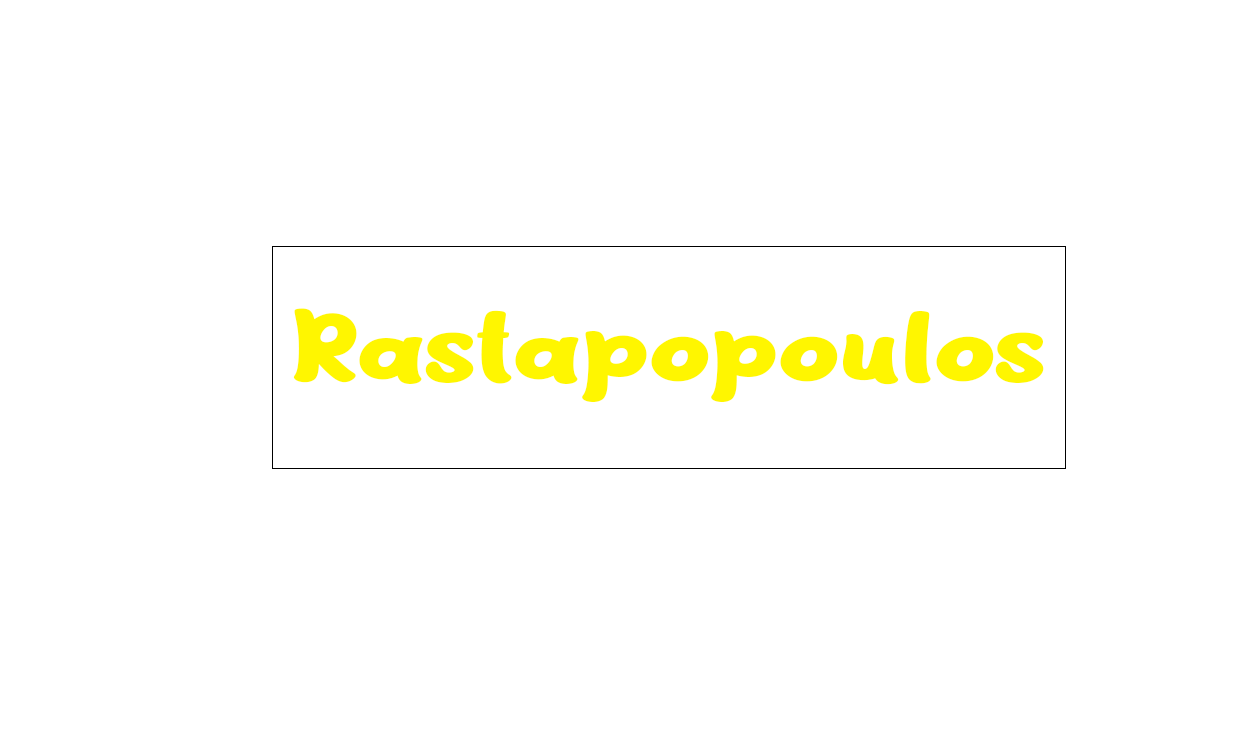
<style>
.page{position:relative;width:1250px;height:750px;background:#ffffff}
.page>*{position:absolute;margin:0}
.t1{font:93.1px "ChocolateCookies";color:#fff600;scale:1.2 1}
</style>
<div class="page">
<p class="t1" style="left:293px;top:308px;width:751px;height:94px">Rastapopoulos</p>
</div>
